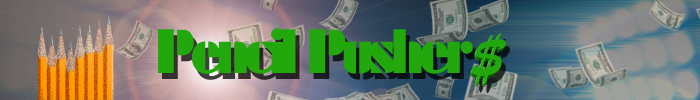
<style>
.page{position:relative;width:700px;height:100px}
.page>*{position:absolute;margin:0}
.t1{font:66.7px "Futura_Poster-Light";letter-spacing:-0.075em;color:#22a70c}
</style>
<div class="page">
<p class="t1" style="left:158px;top:28px;width:315px;height:46px">Pencil Pusher</p>
</div>
